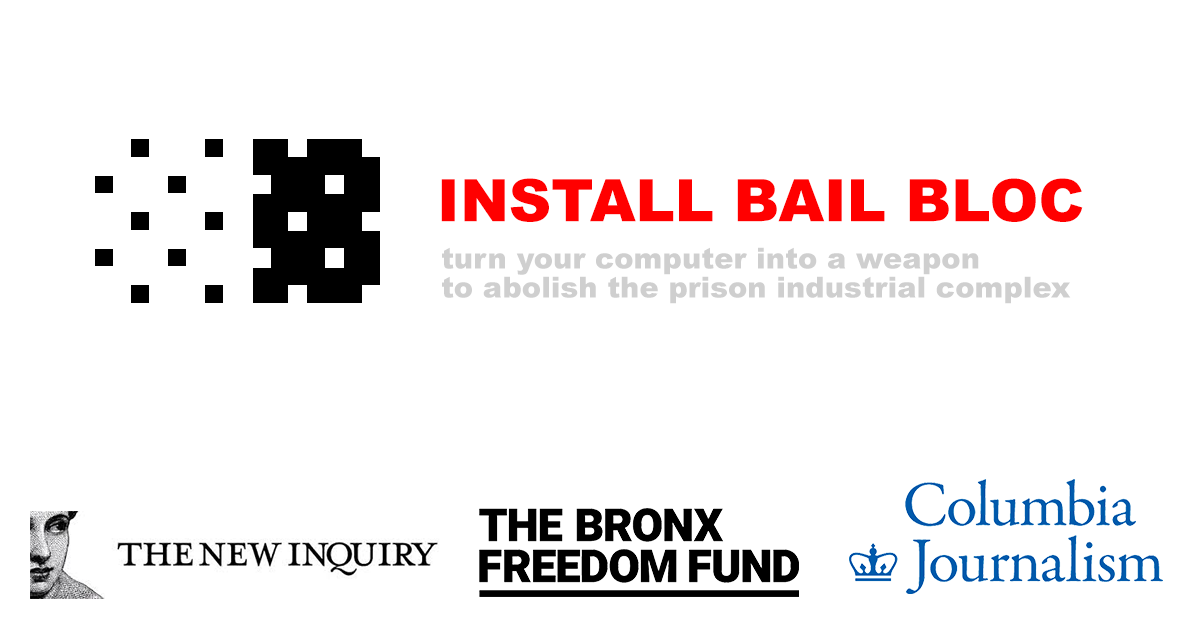
<style>
.page{position:relative;width:1200px;height:630px;background:#ffffff}
.page>*{position:absolute;margin:0}
.t1{font:58.8px "Arial-Black";color:#ff0000}
.t2{font:29px/29px "Arial-Black";color:#cfcfcf}
</style>
<div class="page">
<p class="t1" style="left:441px;top:178px;width:642px;height:44px">INSTALL BAIL BLOC</p>
<p class="t2" style="left:442px;top:247px;width:629px;height:57px">turn your computer into a weapon<br>to abolish the prison industrial complex</p>
</div>
